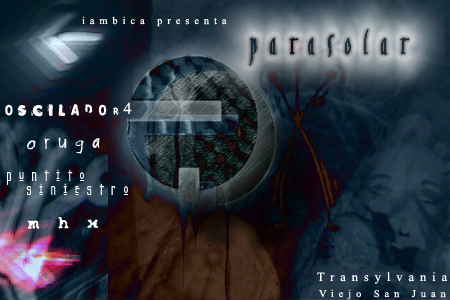
<style>
.page{position:relative;width:450px;height:300px}
.page>*{position:absolute;margin:0}
.t1{font:10.4px "TimesNewRomanPSMT";letter-spacing:0.475em;color:#ffffff}
.t2{font:12.5px "Polaroid22";letter-spacing:0.475em;color:#fefcfc}
.t3{font:16.7px "TimesNewRomanPSMT";letter-spacing:0.475em;color:#fefcfc}
.t4{font:18.8px "Psycho-Poetry-Regular";letter-spacing:0.475em;color:#fefcfc}
.t5{font:16.7px "Kashmir";letter-spacing:0.475em;color:#ffffff}
.t6{font:14.6px "SmashTrialVersion";letter-spacing:0.475em;color:#ffffff}
.t7{font:12.5px "TimesNewRomanPSMT";letter-spacing:0.475em;color:#ffffff}
</style>
<div class="page">
<p class="t1" style="left:82px;top:16px;width:145px;height:11px">iambica presenta</p>
<p class="t2" style="left:5px;top:102px;width:127px;height:15px">oscilador<span class="t3">4</span></p>
<p class="t4" style="left:27px;top:137px;width:73px;height:17px">oruga</p>
<p class="t5" style="left:7px;top:169px;width:77px;height:16px">puntito</p>
<p class="t5" style="left:26px;top:183px;width:102px;height:12px">siniestro</p>
<p class="t6" style="left:27px;top:217px;width:71px;height:12px">m h x</p>
<p class="t7" style="left:317px;top:272px;width:131px;height:12px">Transylvania</p>
<p class="t1" style="left:319px;top:289px;width:127px;height:11px">Viejo San Juan</p>
</div>
